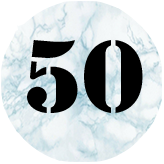
<style>
.page{position:relative;width:164px;height:164px;background:#ffffff}
.page>*{position:absolute;margin:0}
.t1{font:95.5px "StencilStd";color:#000000}
</style>
<div class="page">
<p class="t1" style="left:27px;top:40px;width:116px;height:73px">50</p>
</div>
